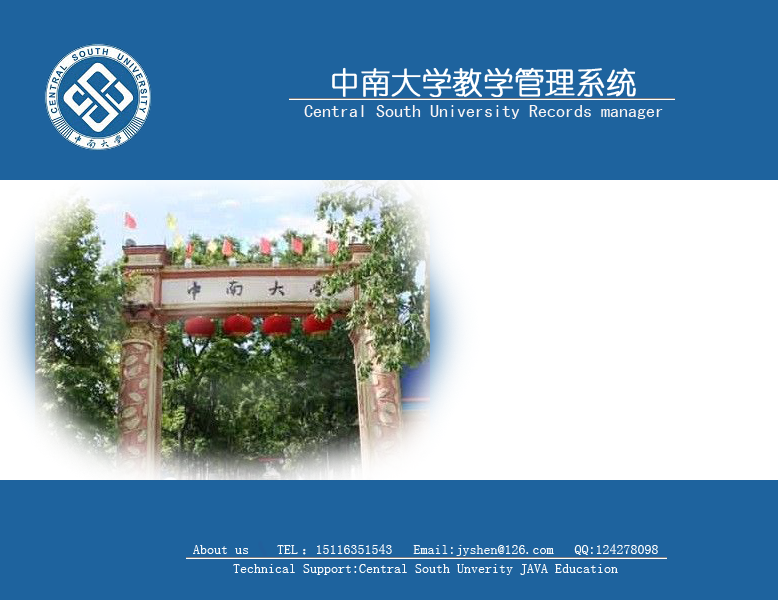
<style>
.page{position:relative;width:778px;height:600px;background:#1e639e}
.page>*{position:absolute;margin:0}
.t1{font:30px "YouYuan";color:#ffffff;font-weight:bold}
.t2{font:18px "SimHei";color:#f9f4f4}
.t3{font:14px "SimSun";color:#fbfbfb}
</style>
<div class="page">
<p class="t1" style="left:332px;top:67px;width:304px;height:31px">中南大学教学管理系统</p>
<p class="t2" style="left:304px;top:105px;width:359px;height:14px">Central South University Records manager</p>
<p class="t3" style="left:193px;top:544px;width:465px;height:12px">About us    TEL ：15116351543   Email:jyshen@126.com   QQ:124278098</p>
<p class="t3" style="left:233px;top:564px;width:385px;height:11px">Technical Support:Central South Unverity JAVA Education</p>
</div>
